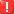
<style>
.page{position:relative;width:14px;height:14px;background:#ff3731}
.page>*{position:absolute;margin:0}
.t1{font:13.5px "Arial-BoldMT";color:#ffffff}
</style>
<div class="page">
<p class="t1" style="left:6px;top:2px;width:2px;height:10px">!</p>
</div>
